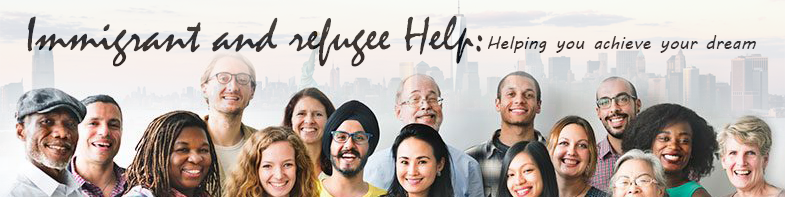
<style>
.page{position:relative;width:785px;height:197px}
.page>*{position:absolute;margin:0}
.t1{font:51.1px "Mistral";color:#383231}
.t2{font:18.1px "MVBoli";color:#39312f}
</style>
<div class="page">
<p class="t1" style="left:27px;top:16px;width:456px;height:51px">Immigrant and refugee Help:</p>
<p class="t2" style="left:488px;top:35px;width:268px;height:18px">Helping you achieve your dream</p>
</div>
